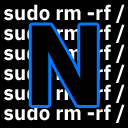
<style>
.page{position:relative;width:128px;height:128px;background:#000000}
.page>*{position:absolute;margin:0}
.t1{font:20.6px "IBMPlexSansKR-Bold";color:#ffffff}
.t2{font:20.6px "IBMPlexSansKR-Bold"}
.t3{font:113.9px "IBMPlexSansKR-Bold";color:#000000}
</style>
<div class="page">
<p class="t1" style="left:4px;top:4px;width:121px;height:19px">sudo rm -rf /</p>
<p class="t2" style="left:4px;top:24px;width:121px;height:19px">sudo rm -rf /</p>
<p class="t3" style="left:31px;top:25px;width:66px;height:80px">N</p>
<p class="t2" style="left:4px;top:44px;width:121px;height:19px">sudo rm -rf /</p>
<p class="t2" style="left:4px;top:64px;width:121px;height:19px">sudo rm -rf /</p>
<p class="t2" style="left:4px;top:84px;width:121px;height:19px">sudo rm -rf /</p>
<p class="t1" style="left:4px;top:104px;width:121px;height:19px">sudo rm -rf /</p>
</div>
